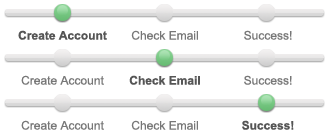
<style>
.page{position:relative;width:330px;height:135px;background:#ffffff}
.page>*{position:absolute;margin:0}
.t1{font:12px "Arial-BoldMT";color:#555555}
.t2{font:12px "ArialMT";color:#777777}
</style>
<div class="page">
<p class="t1" style="left:18px;top:30px;width:89px;height:10px">Create Account</p>
<p class="t2" style="left:131px;top:30px;width:67px;height:10px">Check Email</p>
<p class="t2" style="left:244px;top:30px;width:48px;height:10px">Success!</p>
<p class="t2" style="left:21px;top:75px;width:83px;height:10px">Create Account</p>
<p class="t1" style="left:129px;top:75px;width:71px;height:10px">Check Email</p>
<p class="t2" style="left:244px;top:75px;width:48px;height:10px">Success!</p>
<p class="t2" style="left:21px;top:120px;width:83px;height:10px">Create Account</p>
<p class="t2" style="left:131px;top:120px;width:67px;height:10px">Check Email</p>
<p class="t1" style="left:242px;top:120px;width:52px;height:10px">Success!</p>
</div>
